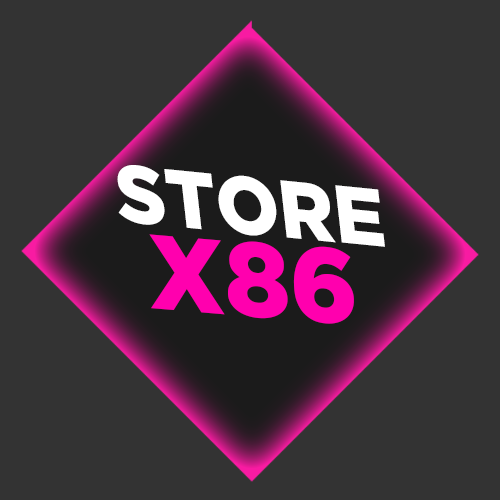
<style>
.page{position:relative;width:500px;height:500px;background:#333333}
.page>*{position:absolute;margin:0}
.t1{font:82.2px "GothamBlack";color:#ffffff;scale:0.93 1}
.t2{font:105.6px "GothamBlack";color:#ff00ae}
</style>
<div class="page">
<p class="t1" style="left:117px;top:165px;width:268px;height:82px;rotate:6deg">STORE</p>
<p class="t2" style="left:149px;top:234px;width:205px;height:90px;rotate:5deg">X86</p>
</div>
